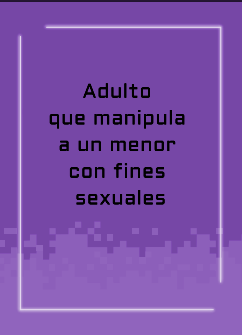
<style>
.page{position:relative;width:242px;height:335px;background:#7647a6}
.page>*{position:absolute;margin:0}
.t1{font:20px/26.7px "Aldrich-Regular";letter-spacing:0.025em;color:#000000}
</style>
<div class="page">
<p class="t1" style="left:49px;top:83px;width:136px;height:122px;text-align:center">Adulto <br>que manipula <br>a un menor <br>con fines <br>sexuales</p>
</div>
